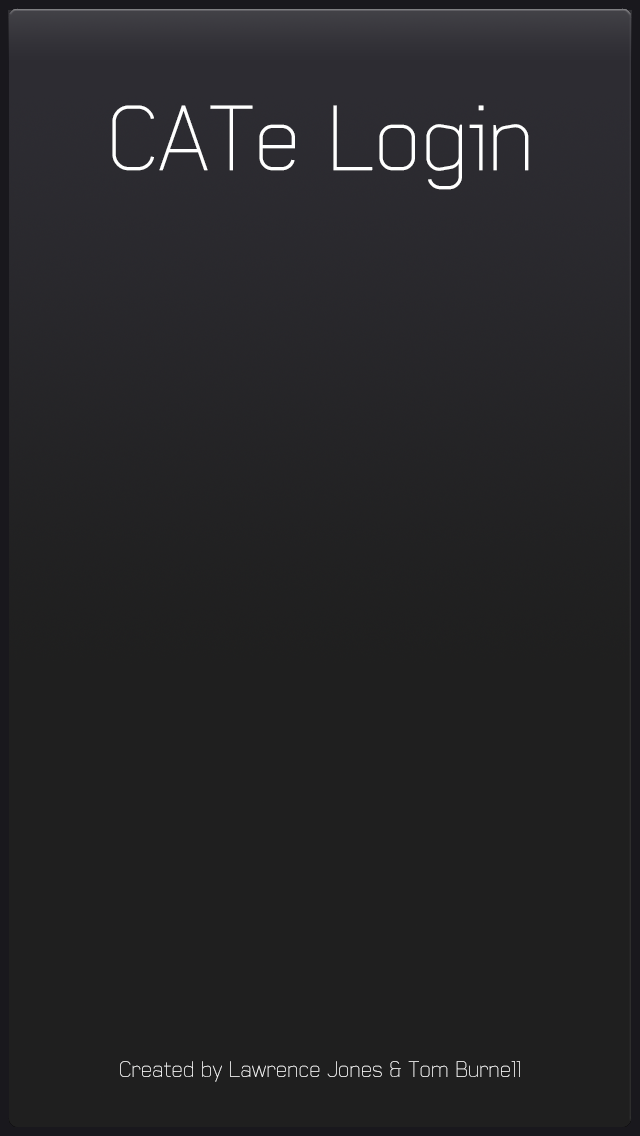
<style>
.page{position:relative;width:640px;height:1136px;background:#1f1f1f}
.page>*{position:absolute;margin:0}
.t1{font:90px "BaksheeshThin";color:#ffffff}
.t2{font:22px "BaksheeshThin";color:#ffffff}
</style>
<div class="page">
<p class="t1" style="left:112px;top:105px;width:417px;height:85px">CATe Login</p>
<p class="t2" style="left:120px;top:1061px;width:400px;height:21px">Created by Lawrence Jones &amp; Tom Burnell</p>
</div>
